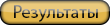
<style>
.page{position:relative;width:110px;height:25px;background:#ebca7c}
.page>*{position:absolute;margin:0}
.t1{font:18px "MyriadPro-Regular"}
</style>
<div class="page">
<p class="t1" style="left:14px;top:5px;width:84px;height:17px">Результаты</p>
</div>
